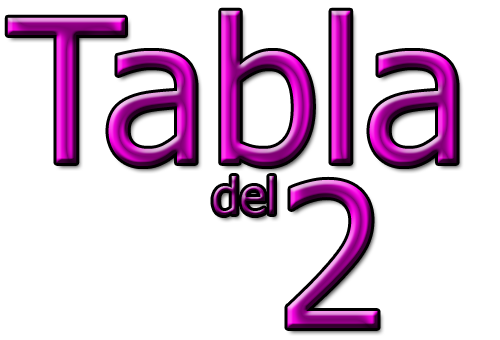
<style>
.page{position:relative;width:500px;height:340px;background:#ffffff}
.page>*{position:absolute;margin:0}
.t1{font:200px "Tahoma"}
</style>
<div class="page">
<p class="t1" style="left:7px;top:10px;width:450px;height:156px">Tabla</p>
<p class="t1" style="left:287px;top:179px;width:91px;height:149px">2</p>
</div>
